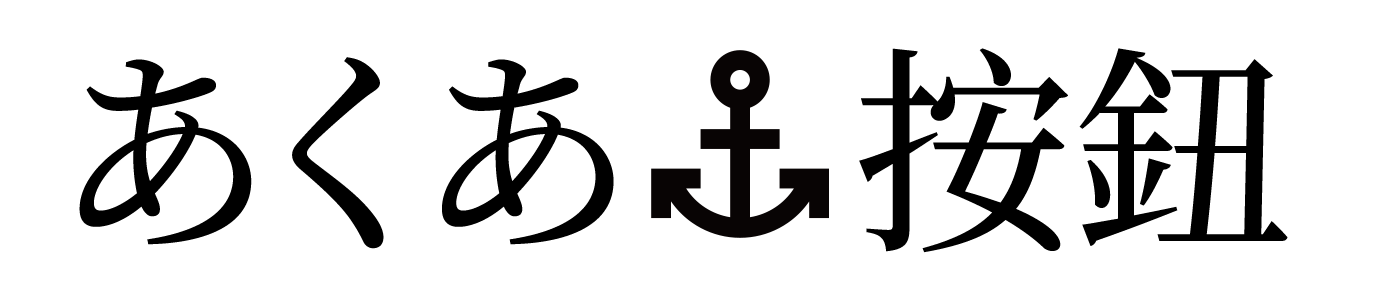
<style>
.page{position:relative;width:1400px;height:300px;background:#ffffff}
.page>*{position:absolute;margin:0}
.t1{font:220px "SourceHanSerifSC-Medium";color:#000000}
</style>
<div class="page">
<p class="t1" style="left:79px;top:48px;width:1209px;height:205px">あくあ    按鈕</p>
</div>
